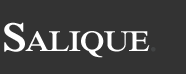
<style>
.page{position:relative;width:186px;height:74px;background:#333333}
.page>*{position:absolute;margin:0}
.t1{font:29.9px "IskoolaPota-Bold";letter-spacing:-0.025em;color:#ffffff}
.t2{font:41.8px "IskoolaPota-Bold";letter-spacing:-0.025em;color:#ffffff}
.t3{font:29.9px "IskoolaPota-Bold";letter-spacing:-0.025em;color:#414344}
</style>
<div class="page">
<p class="t1" style="left:4px;top:22px;width:152px;height:36px"><span class="t2">S</span>ALIQUE<span class="t3">.</span></p>
</div>
